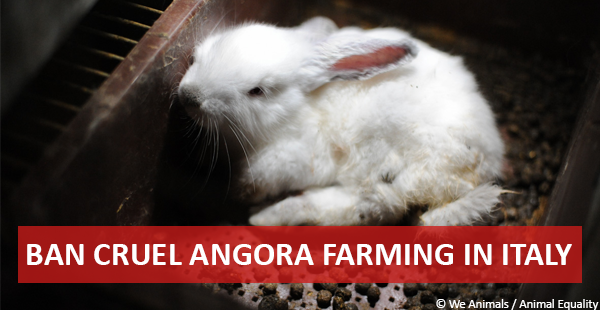
<style>
.page{position:relative;width:600px;height:310px}
.page>*{position:absolute;margin:0}
.t1{font:33.3px "Calibri-Bold";color:#ffffff}
.t2{font:12.5px "Calibri";color:#ffffff}
</style>
<div class="page">
<p class="t1" style="left:27px;top:244px;width:545px;height:21px">BAN CRUEL ANGORA FARMING IN ITALY</p>
<p class="t2" style="left:436px;top:299px;width:163px;height:11px">© We Animals / Animal Equality</p>
</div>
